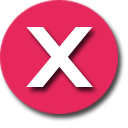
<style>
.page{position:relative;width:128px;height:128px;background:#e6285d}
.page>*{position:absolute;margin:0}
.t1{font:83.9px "Alfphabet-IV";color:#ffffff;scale:1.1 1}
</style>
<div class="page">
<p class="t1" style="left:26px;top:27px;width:67px;height:60px">X</p>
</div>
